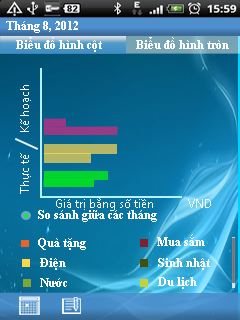
<style>
.page{position:relative;width:240px;height:320px}
.page>*{position:absolute;margin:0}
.t1{font:11.6px "TimesNewRomanPS-BoldMT";color:#ffffff}
.t2{font:11.6px "SegoeUI";color:#ffffff}
</style>
<div class="page">
<p class="t1" style="left:6px;top:21px;width:72px;height:12px">Tháng 8, 2012</p>
<p class="t1" style="left:16px;top:37px;width:86px;height:15px">Biểu đồ hình cột</p>
<p class="t1" style="left:136px;top:37px;width:93px;height:12px">Biểu đồ hình tròn</p>
<p class="t2" style="left:56px;top:197px;width:97px;height:14px">Giá trị bằng số tiền</p>
<p class="t2" style="left:188px;top:199px;width:23px;height:9px">VND</p>
<p class="t1" style="left:38px;top:210px;width:119px;height:12px">So sánh giữa các tháng</p>
<p class="t1" style="left:38px;top:238px;width:48px;height:12px">Quà tặng</p>
<p class="t1" style="left:157px;top:234px;width:48px;height:12px">Mua sắm</p>
<p class="t1" style="left:40px;top:258px;width:26px;height:12px">Điện</p>
<p class="t1" style="left:158px;top:258px;width:52px;height:12px">Sinh nhật</p>
<p class="t1" style="left:40px;top:278px;width:27px;height:9px">Nước</p>
<p class="t1" style="left:158px;top:277px;width:39px;height:12px">Du lịch</p>
</div>
